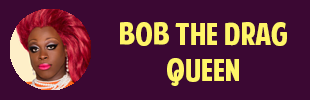
<style>
.page{position:relative;width:310px;height:100px;background:#3b0833}
.page>*{position:absolute;margin:0}
.t1{font:30px "AmericanPurpose";color:#fff568}
.t2{font:24px "Tahoma";color:#ffffff}
</style>
<div class="page">
<p class="t1" style="left:120px;top:22px;width:167px;height:64px;text-align:center"><span class="t2"><br></span>Bob the Drag Queen</p>
</div>
